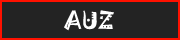
<style>
.page{position:relative;width:180px;height:40px;background:#232323}
.page>*{position:absolute;margin:0}
.t1{font:22px "Jokerman-Regular";color:#ffffff}
</style>
<div class="page">
<p class="t1" style="left:64px;top:10px;width:50px;height:21px">AUZ</p>
</div>
